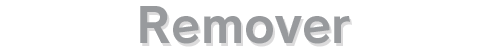
<style>
.page{position:relative;width:490px;height:50px;background:#ffffff}
.page>*{position:absolute;margin:0}
.t1{font:48px "RodinPro-B";color:#989a9d}
</style>
<div class="page">
<p class="t1" style="left:140px;top:6px;width:210px;height:38px">Remover</p>
</div>
